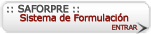
<style>
.page{position:relative;width:151px;height:34px}
.page>*{position:absolute;margin:0}
.t1{font:9.5px "Verdana";letter-spacing:-0.025em;color:#4f4c4c;font-weight:bold}
.t2{font:9.5px "Verdana";letter-spacing:-0.025em;color:#4b4848;font-weight:bold}
.t3{font:9px "Verdana";letter-spacing:-0.025em;color:#881811;font-weight:bold}
.t4{font:6.3px "Verdana";letter-spacing:-0.025em;font-weight:bold}
.t5{font:6.3px "Verdana";letter-spacing:-0.025em;color:#881811;font-weight:bold}
.t6{font:10.9px "Arrows1-Regular";color:#3f3f3f;text-transform:uppercase}
</style>
<div class="page">
<p class="t1" style="left:7px;top:5px;width:72px;height:8px">:: SAFORPRE ::</p>
<p class="t2" style="left:7px;top:4px;width:72px;height:9px">:: SAFORPRE ::</p>
<p class="t3" style="left:20px;top:13px;width:109px;height:9px">Sistema de Formulación</p>
<p class="t3" style="left:20px;top:13px;width:108px;height:8px">Sistema de Formulación</p>
<p class="t4" style="left:112px;top:25px;width:26px;height:5px">ENTRAR</p>
<p class="t5" style="left:112px;top:24px;width:26px;height:6px">ENTRAR</p>
<p class="t6" style="left:136px;top:22px;width:13px;height:12px">r</p>
</div>
